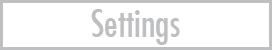
<style>
.page{position:relative;width:272px;height:50px;background:#ffffff}
.page>*{position:absolute;margin:0}
.t1{font:37.3px "FuturaCondensed";color:#bebfc1}
</style>
<div class="page">
<p class="t1" style="left:91px;top:9px;width:89px;height:36px">Settings</p>
</div>
